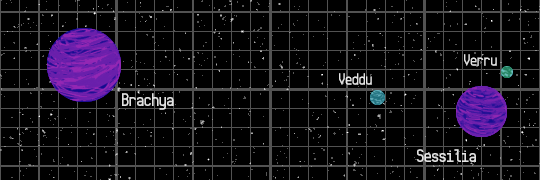
<style>
.page{position:relative;width:540px;height:180px;background:#000000}
.page>*{position:absolute;margin:0}
.t1{font:18px "Monkey";color:#e2e2e2}
.t2{font:20px "Monkey";color:#e2e2e2}
</style>
<div class="page">
<p class="t1" style="left:464px;top:54px;width:33px;height:12px">Verru</p>
<p class="t1" style="left:339px;top:73px;width:33px;height:12px">Veddu</p>
<p class="t2" style="left:122px;top:93px;width:52px;height:17px">Brachya</p>
<p class="t2" style="left:417px;top:149px;width:59px;height:13px">Sessilia</p>
</div>
